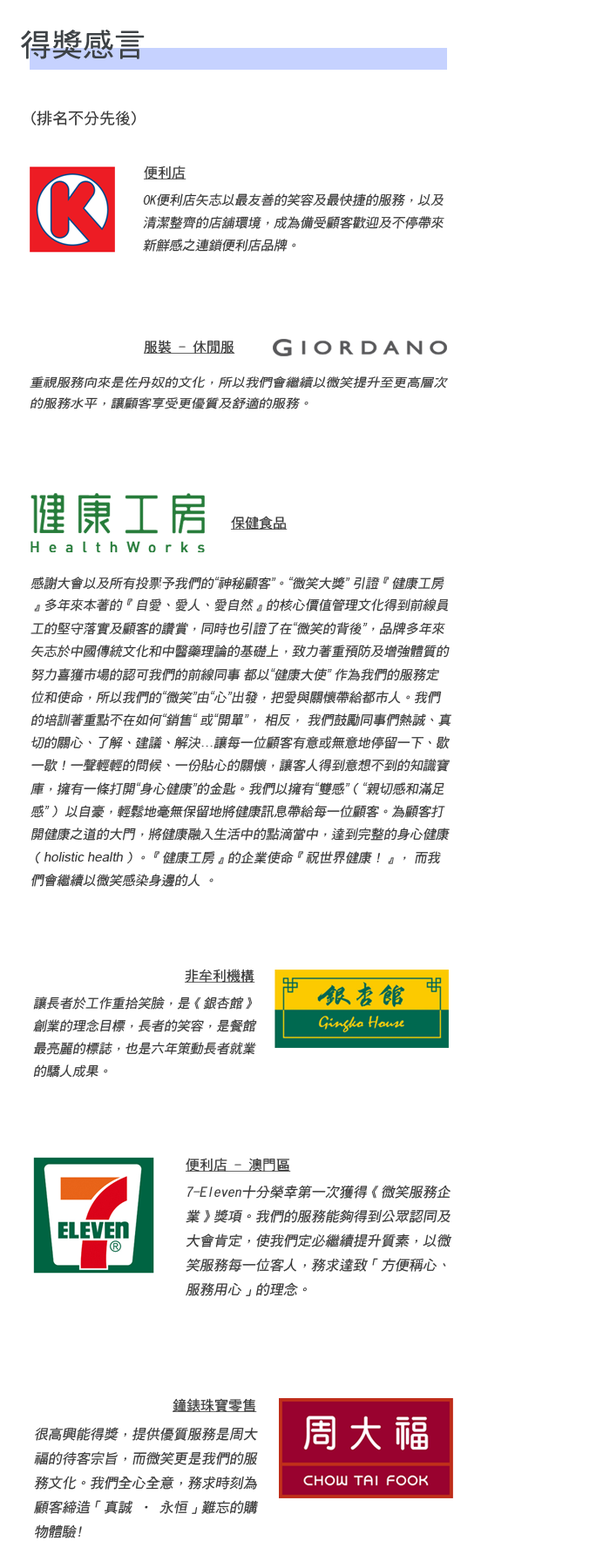
<style>
.page{position:relative;width:610px;height:1568px;background:#ffffff}
.page>*{position:absolute;margin:0}
.t1{font:31.4px "DFHei-Md-HKSCS-U";color:#3d4245}
.t2{font:15.7px "DFHei-Md-HKSCS-U";color:#363636}
.t3{font:13.9px "DFHei-Md-HKSCS-U";color:#363636;text-decoration:underline}
.t4{font:13.1px "DFHei-Md-HKSCS-U";color:#363636;font-style:italic}
.t5{font:12.1px "DFHei-Md-HKSCS-U";color:#363636;font-style:italic;scale:1.11 1}
.t6{font:13.1px "ArialMT";color:#363636;font-style:italic}
.t7{font:13.9px "DFHei-Md-HKSCS-U";color:#363636;font-style:italic}
</style>
<div class="page">
<p class="t1" style="left:21px;top:30px;width:124px;height:29px">得獎感言</p>
<p class="t2" style="left:31px;top:111px;width:105px;height:14px">(排名不分先後)</p>
<p class="t3" style="left:144px;top:166px;width:42px;height:13px">便利店</p>
<p class="t4" style="left:143px;top:193px;width:301px;height:59px">OK便利店矢志以最友善的笑容及最快捷的服務，以及清潔整齊的店舖環境，成為備受顧客歡迎及不停帶來新鮮感之連鎖便利店品牌。</p>
<p class="t3" style="left:144px;top:340px;width:91px;height:14px">服裝 - 休閒服</p>
<p class="t5" style="left:30px;top:376px;width:418px;height:33px">重視服務向來是佐丹奴的文化，所以我們會繼續以微笑提升至更高層次的服務水平，讓顧客享受更優質及舒適的服務。</p>
<p class="t3" style="left:231px;top:516px;width:56px;height:14px">保健食品</p>
<p class="t4" style="left:30px;top:577px;width:421px;height:310px">感謝大會以及所有投票予我們的<span class="t6">“</span>神秘顧客<span class="t6">”</span>。<span class="t6">“</span>微笑大獎<span class="t6">” </span>引證『健康工房』多年來本著的『自愛、愛人、愛自然』的核心價值管理文化得到前線員工的堅守落實及顧客的讚賞，同時也引證了在<span class="t6">“</span>微笑的背後<span class="t6">”</span>，品牌多年來矢志於中國傳統文化和中醫藥理論的基礎上，致力著重預防及增強體質的努力喜獲市場的認可我們的前線同事 都以<span class="t6">“</span>健康大使<span class="t6">” </span>作為我們的服務定位和使命，所以我們的<span class="t6">“</span>微笑<span class="t6">”</span>由<span class="t6">“</span>心<span class="t6">”</span>出發，把愛與關懷帶給都市人。我們的培訓著重點不在如何<span class="t6">“</span>銷售<span class="t6">“ </span>或<span class="t6">“</span>開單<span class="t6">”</span>， 相反， 我們鼓勵同事們熱誠、真切的關心、了解、建議、解決<span class="t6">…</span>讓每一位顧客有意或無意地停留一下、歇一歇！一聲輕輕的問候、一份貼心的關懷，讓客人得到意想不到的知識寶庫，擁有一條打開<span class="t6">“</span>身心健康<span class="t6">”</span>的金匙。我們以擁有<span class="t6">“</span>雙感<span class="t6">”</span>（<span class="t6">“</span>親切感和滿足感<span class="t6">”</span>） 以自豪，輕鬆地毫無保留地將健康訊息帶給每一位顧客。為顧客打開健康之道的大門，將健康融入生活中的點滴當中，達到完整的身心健康（<span class="t6">holistic health</span>）。『健康工房』的企業使命『祝世界健康！』， 而我們會繼續以微笑感染身邊的人 。</p>
<p class="t3" style="left:185px;top:969px;width:70px;height:14px">非牟利機構</p>
<p class="t4" style="left:33px;top:997px;width:224px;height:81px">讓長者於工作重拾笑臉，是《銀杏館》創業的理念目標，長者的笑容，是餐館最亮麗的標誌，也是六年策動長者就業的驕人成果。</p>
<p class="t3" style="left:186px;top:1158px;width:105px;height:14px">便利店 - 澳門區</p>
<p class="t7" style="left:186px;top:1185px;width:266px;height:111px">7-Eleven十分榮幸第一次獲得《微笑服務企業》獎項。我們的服務能夠得到公眾認同及大會肯定，使我們定必繼續提升質素，以微笑服務每一位客人，務求達致「方便稱心、服務用心」的理念。</p>
<p class="t3" style="left:172px;top:1398px;width:85px;height:14px">鐘錶珠寶零售</p>
<p class="t7" style="left:34px;top:1427px;width:225px;height:111px">很高興能得獎，提供優質服務是周大福的待客宗旨，而微笑更是我們的服務文化。我們全心全意，務求時刻為顧客締造「真誠 • 永恒」難忘的購物體驗﹗</p>
</div>
